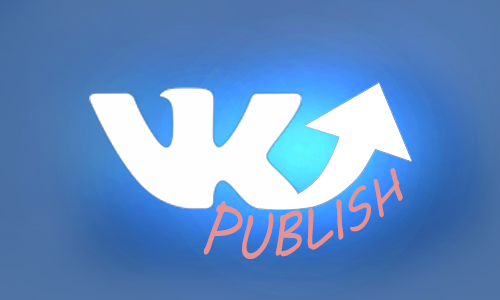
<style>
.page{position:relative;width:500px;height:300px}
.page>*{position:absolute;margin:0}
.t1{font:51.4px "MVBoli";color:#e49292;scale:0.94 1}
</style>
<div class="page">
<p class="t1" style="left:203px;top:168px;width:200px;height:91px;rotate:-14deg">PUBLISH</p>
</div>
